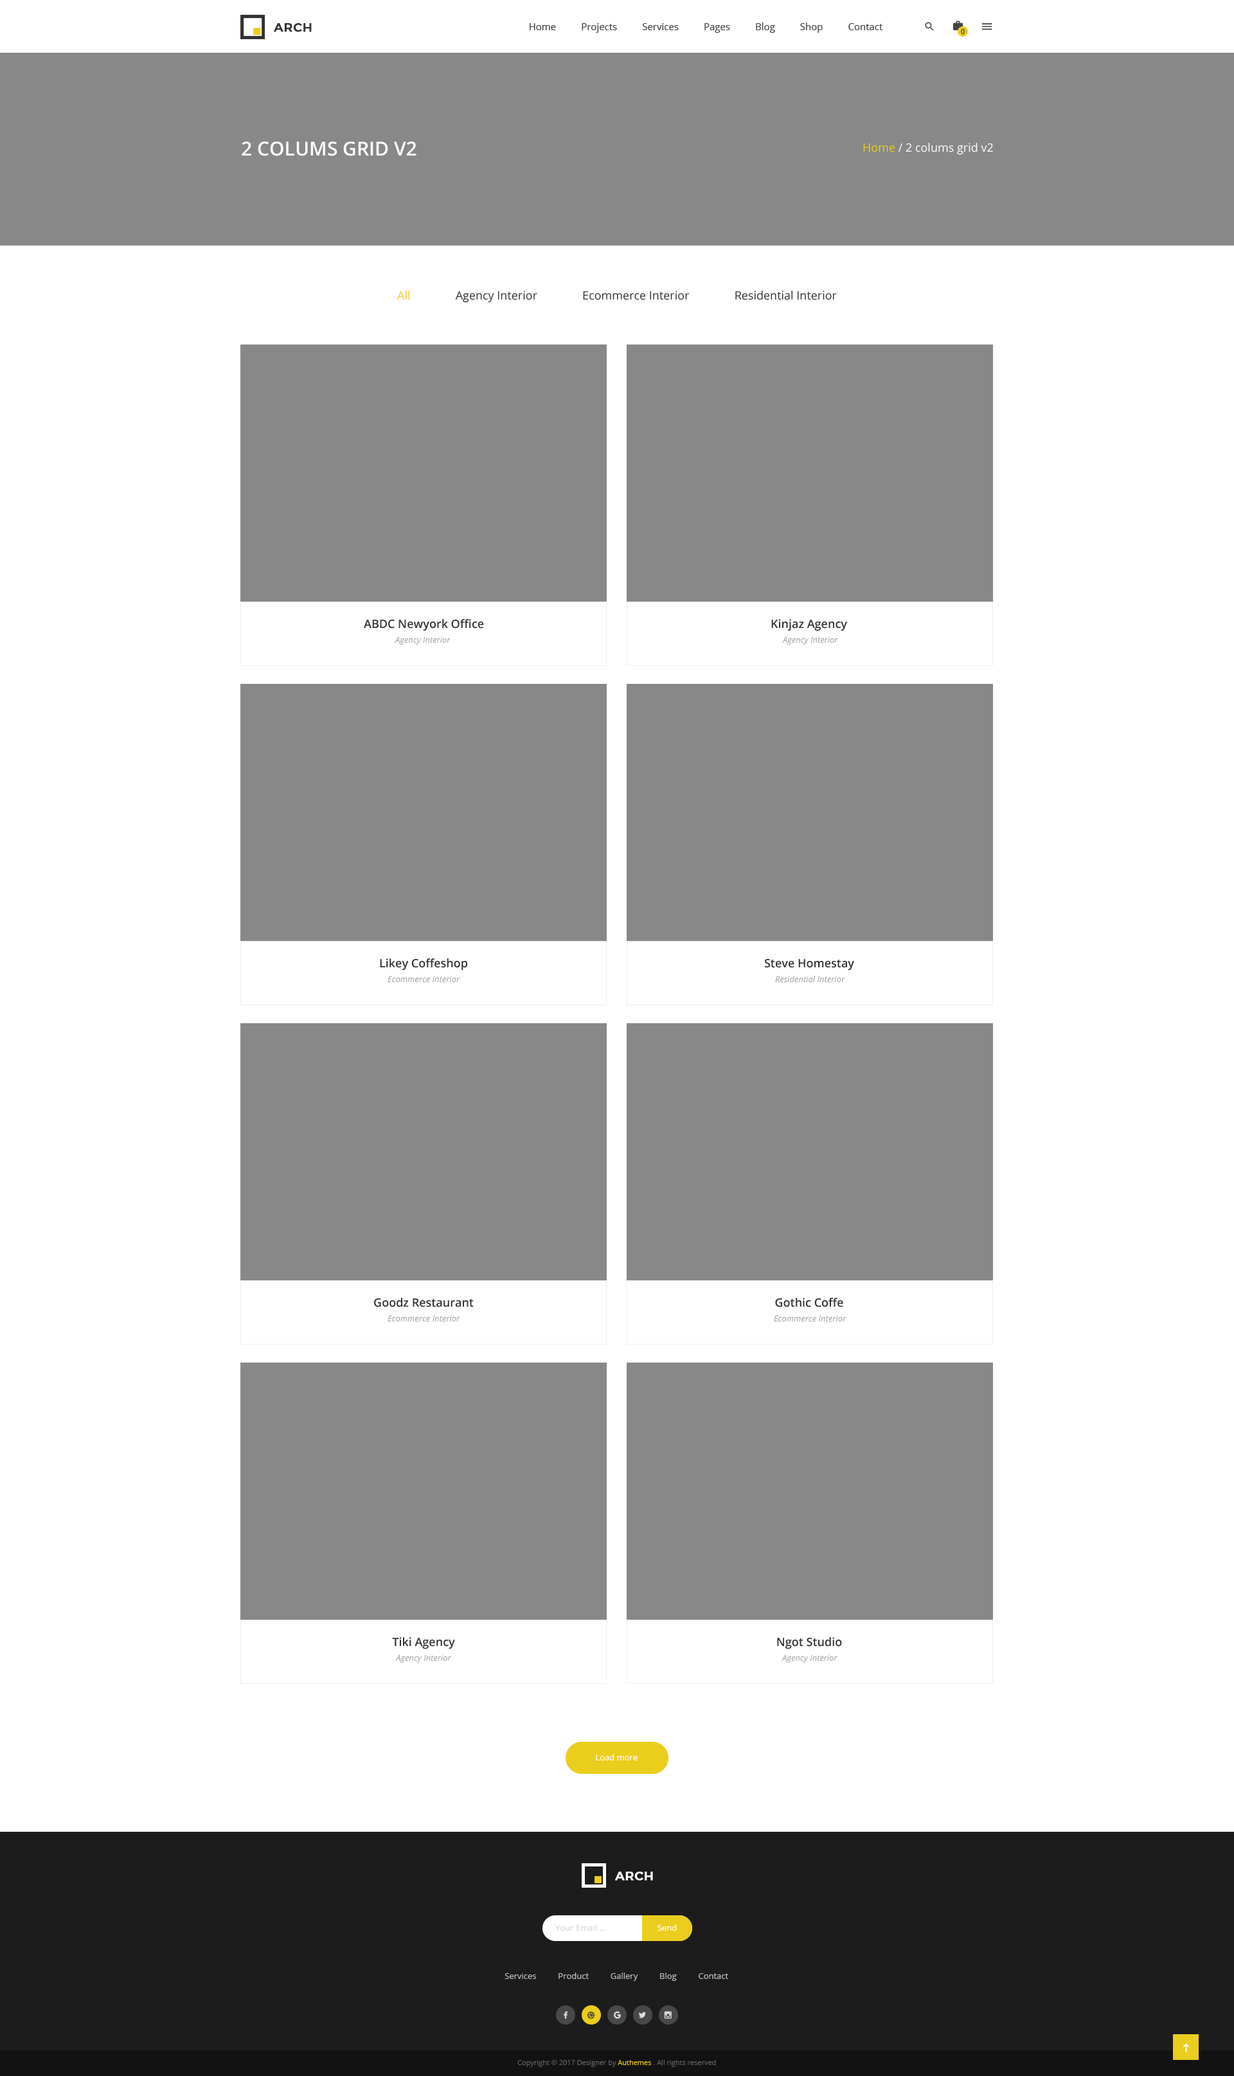
<style>
.page{position:relative;width:1234px;height:2076px;background:#ffffff}
.page>*{position:absolute;margin:0}
.t1{font:12.2px "Montserrat-Medium";letter-spacing:0.025em;color:#333333;text-transform:uppercase;font-weight:bold}
.t2{font:9.6px "OpenSans";color:#444444}
.t3{font:7.1px "OpenSans";color:#333333}
.t4{font:19.3px "OpenSans-Semibold";color:#ffffff;text-transform:uppercase}
.t5{font:11.6px "OpenSans";color:#ffffff}
.t6{font:11.6px "OpenSans";color:#ebcd1e}
.t7{font:11.6px "OpenSans";color:#333333}
.t8{font:11.6px "OpenSans-Semibold";color:#333333}
.t9{font:8.4px "OpenSans-Italic";color:#999999}
.t10{font:8.4px "OpenSans";color:#ffffff}
.t11{font:12.2px "Montserrat-Medium";letter-spacing:0.025em;color:#ffffff;text-transform:uppercase;font-weight:bold}
.t12{font:8.4px "OpenSans";color:#d6d6d6}
.t13{font:8.4px "OpenSans";color:#c2c2c2}
.t14{font:7.1px "OpenSans";color:#626262}
.t15{font:7.1px "OpenSans";color:#ebcd1e}
</style>
<div class="page">
<p class="t1" style="left:274px;top:23px;width:38px;height:9px">arch</p>
<p class="t2" style="left:530px;top:22px;width:353px;height:11px">Home          Projects          Services          Pages          Blog          Shop          Contact</p>
<p class="t3" style="left:961px;top:29px;width:4px;height:5px">0</p>
<p class="t4" style="left:242px;top:141px;width:175px;height:15px">2 colums grid v2</p>
<p class="t5" style="left:863px;top:143px;width:130px;height:12px"><span class="t6">Home</span> / 2 colums grid v2</p>
<p class="t7" style="left:397px;top:291px;width:440px;height:12px"><span class="t6">All</span>               Agency Interior               Ecommerce Interior               Residential Interior</p>
<p class="t8" style="left:364px;top:619px;width:120px;height:12px">ABDC Newyork Office</p>
<p class="t8" style="left:771px;top:619px;width:76px;height:12px">Kinjaz Agency</p>
<p class="t9" style="left:395px;top:636px;width:56px;height:9px">Agency Interior</p>
<p class="t9" style="left:782px;top:636px;width:56px;height:9px">Agency Interior</p>
<p class="t8" style="left:380px;top:959px;width:87px;height:12px">Likey Coffeshop</p>
<p class="t8" style="left:765px;top:959px;width:89px;height:12px">Steve Homestay</p>
<p class="t9" style="left:388px;top:976px;width:72px;height:7px">Ecommerce Interior</p>
<p class="t9" style="left:775px;top:976px;width:70px;height:7px">Residential Interior</p>
<p class="t8" style="left:374px;top:1298px;width:100px;height:10px">Goodz Restaurant</p>
<p class="t8" style="left:775px;top:1298px;width:68px;height:10px">Gothic Coffe</p>
<p class="t9" style="left:388px;top:1315px;width:72px;height:7px">Ecommerce Interior</p>
<p class="t9" style="left:774px;top:1315px;width:73px;height:7px">Ecommerce Interior</p>
<p class="t8" style="left:392px;top:1637px;width:63px;height:13px">Tiki Agency</p>
<p class="t8" style="left:777px;top:1637px;width:65px;height:13px">Ngot Studio</p>
<p class="t9" style="left:395px;top:1655px;width:56px;height:8px">Agency Interior</p>
<p class="t9" style="left:782px;top:1655px;width:56px;height:8px">Agency Interior</p>
<p class="t10" style="left:596px;top:1754px;width:42px;height:7px">Load more</p>
<p class="t11" style="left:615px;top:1872px;width:38px;height:9px">arch</p>
<p class="t12" style="left:555px;top:1925px;width:51px;height:6px">Your Email ...</p>
<p class="t10" style="left:658px;top:1925px;width:19px;height:6px">Send</p>
<p class="t13" style="left:505px;top:1973px;width:223px;height:8px">Services          Product          Gallery          Blog          Contact</p>
<p class="t14" style="left:518px;top:2060px;width:198px;height:7px">Copyright © 2017 Designer by <span class="t15">Authemes </span>. All rights reserved</p>
</div>
